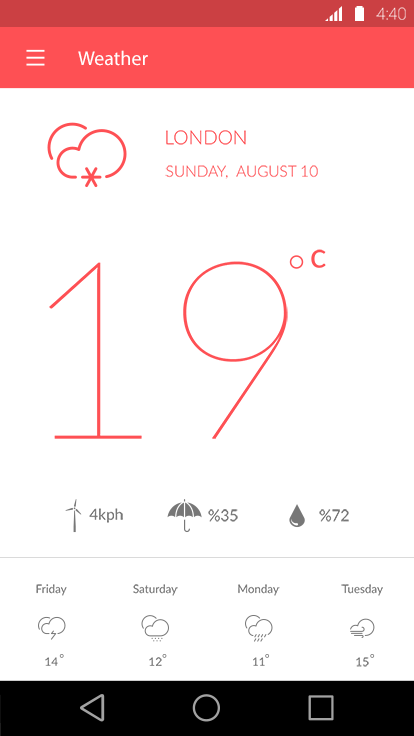
<style>
.page{position:relative;width:414px;height:736px;background:#ffffff}
.page>*{position:absolute;margin:0}
.t1{font:16.5px "Roboto-Thin"}
.t2{font:19.9px "MyriadPro-Regular";color:#ffffff}
.t3{font:19.2px "Lato-Light";color:#fe5054}
.t4{font:15.3px "Lato-Light";color:#fe5054;text-transform:uppercase}
.t5{font:34.5px "Lato-Regular";color:#fe5054}
.t6{font:249.2px "Lato-Hairline";color:#fe5054;text-transform:uppercase}
.t7{font:15.3px "Lato-Regular";color:#777777}
.t8{font:11.5px "Lato-Regular";color:#777777}
</style>
<div class="page">
<p class="t1" style="left:376px;top:7px;width:30px;height:13px">4:40</p>
<p class="t2" style="left:78px;top:50px;width:70px;height:16px">Weather</p>
<p class="t3" style="left:166px;top:130px;width:80px;height:15px">LONDON</p>
<p class="t4" style="left:165px;top:165px;width:153px;height:14px">SUNDAY,  AUGUST 10</p>
<p class="t5" style="left:311px;top:249px;width:15px;height:19px">c</p>
<p class="t6" style="left:49px;top:261px;width:239px;height:178px">19</p>
<p class="t7" style="left:89px;top:508px;width:34px;height:15px">4kph</p>
<p class="t7" style="left:208px;top:509px;width:30px;height:13px">%35</p>
<p class="t7" style="left:319px;top:509px;width:30px;height:13px">%72</p>
<p class="t8" style="left:36px;top:584px;width:31px;height:12px">Friday</p>
<p class="t8" style="left:133px;top:584px;width:45px;height:12px">Saturday</p>
<p class="t8" style="left:238px;top:584px;width:42px;height:12px">Monday</p>
<p class="t8" style="left:341px;top:584px;width:42px;height:12px">Tuesday</p>
<p class="t8" style="left:45px;top:657px;width:13px;height:9px">14</p>
<p class="t8" style="left:149px;top:657px;width:13px;height:9px">12</p>
<p class="t8" style="left:253px;top:657px;width:12px;height:9px">11</p>
<p class="t8" style="left:356px;top:657px;width:13px;height:10px">15</p>
</div>
